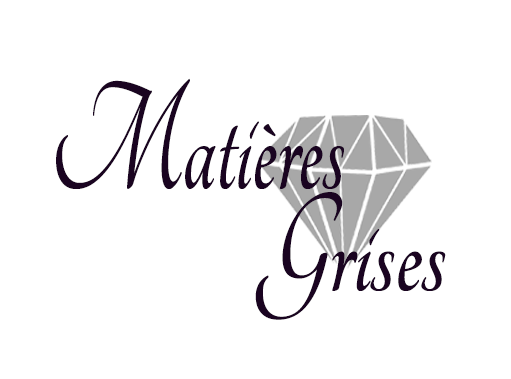
<style>
.page{position:relative;width:511px;height:379px;background:#ffffff}
.page>*{position:absolute;margin:0}
.t1{font:167.4px "Tangerine-Bold";color:#1a0421;scale:0.61 1}
.t2{font:153.8px "Tangerine-Bold";color:#1a0421;scale:0.74 1}
</style>
<div class="page">
<p class="t1" style="left:56px;top:78px;width:288px;height:111px">Matières</p>
<p class="t2" style="left:255px;top:192px;width:191px;height:128px">Grises</p>
</div>
